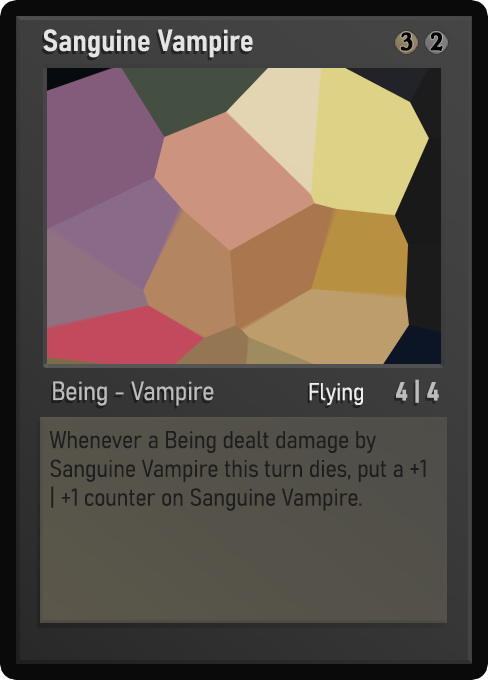
<style>
.page{position:relative;width:488px;height:680px}
.page>*{position:absolute;margin:0}
.t1{font:30px "Bahnschrift-SemiBoldSemiCondensed";color:#f2f2f2;font-weight:bold}
.t2{font:25px "WTRRoycroft";color:#000000;font-weight:bold;scale:1.09 1}
.t3{font:26px "Bahnschrift-LightSemiCondensed";color:#c8c8c8;font-weight:bold}
.t4{font:24px "Bahnschrift-LightSemiCondensed";color:#f0efef;font-weight:bold}
.t5{font:26px "Bahnschrift-BoldSemiCondensed";color:#bdbdbd;font-weight:bold}
.t6{font:24px "Bahnschrift-LightSemiCondensed";color:#1e1e1e;font-weight:bold}
</style>
<div class="page">
<p class="t1" style="left:43px;top:29px;width:210px;height:29px;opacity:0.9">Sanguine Vampire</p>
<p class="t2" style="left:400px;top:32px;width:13px;height:19px">3</p>
<p class="t2" style="left:430px;top:32px;width:13px;height:19px">2</p>
<p class="t3" style="left:53px;top:381px;width:161px;height:25px;opacity:0.9">Being - Vampire</p>
<p class="t4" style="left:309px;top:383px;width:54px;height:23px">Flying</p>
<p class="t5" style="left:396px;top:379px;width:43px;height:24px">4 | 4</p>
<p class="t6" style="left:49px;top:431px;width:377px;height:80px">Whenever a Being dealt damage by Sanguine Vampire this turn dies, put a +1 | +1 counter on Sanguine Vampire.</p>
</div>
